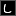
<style>
.page{position:relative;width:16px;height:16px;background:#000000}
.page>*{position:absolute;margin:0}
.t1{font:15px "FinelinerScript";color:#ffffff}
</style>
<div class="page">
<p class="t1" style="left:3px;top:4px;width:9px;height:9px">L</p>
</div>
